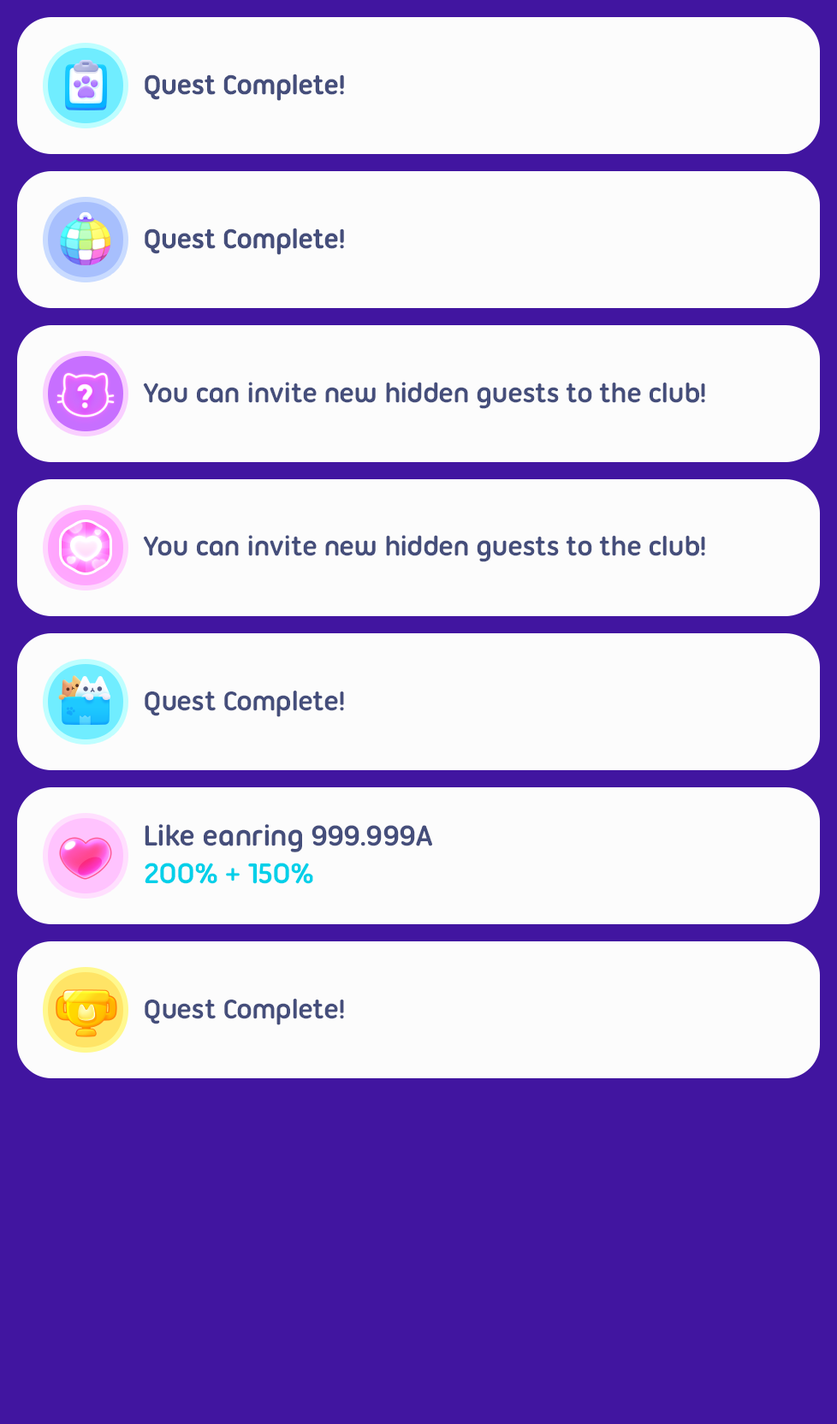
<style>
.page{position:relative;width:837px;height:1424px;background:#fcfcfc}
.page>*{position:absolute;margin:0}
.t1{font:29.1px "UbuntuTitling-Bold";letter-spacing:-0.025em;color:#454e7b}
.t2{font:30.8px "UbuntuTitling-Bold";letter-spacing:-0.025em;color:#454e7b}
.t3{font:30.8px "UbuntuTitling-Bold";letter-spacing:-0.025em;color:#00d0e9}
</style>
<div class="page">
<p class="t1" style="left:145px;top:74px;width:199px;height:27px">Quest Complete!</p>
<p class="t1" style="left:145px;top:228px;width:199px;height:27px">Quest Complete!</p>
<p class="t1" style="left:143px;top:382px;width:562px;height:27px">You can invite new hidden guests to the club!</p>
<p class="t1" style="left:143px;top:535px;width:562px;height:27px">You can invite new hidden guests to the club!</p>
<p class="t1" style="left:145px;top:691px;width:199px;height:26px">Quest Complete!</p>
<p class="t2" style="left:145px;top:824px;width:287px;height:29px">Like eanring 999.999A</p>
<p class="t3" style="left:145px;top:863px;width:168px;height:21px">200% + 150%</p>
<p class="t1" style="left:145px;top:999px;width:199px;height:26px">Quest Complete!</p>
</div>
